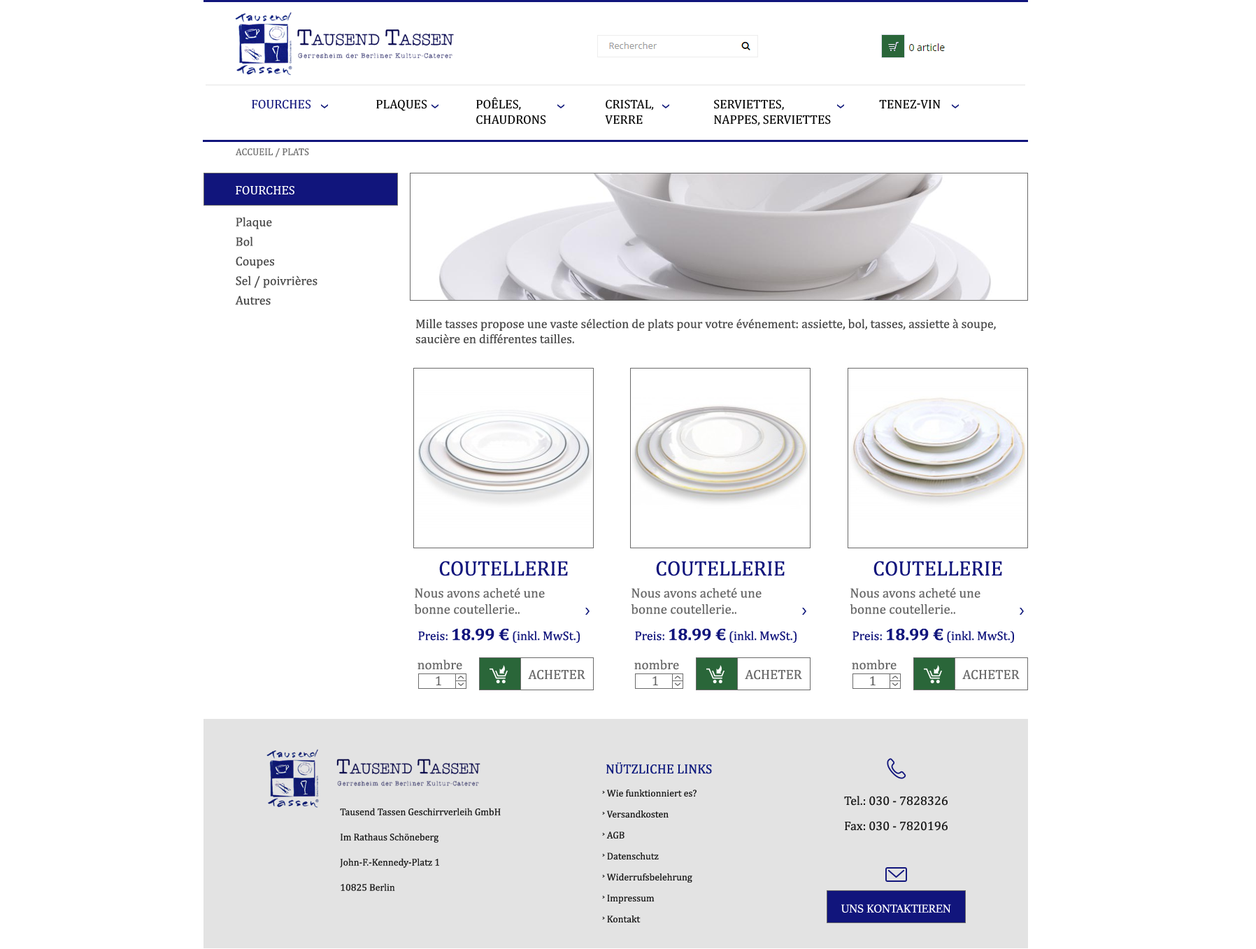
<style>
.page{position:relative;width:1256px;height:949px;background:#ffffff}
.page>*{position:absolute;margin:0}
.t1{font:12.6px "CambriaMath";color:#11157c;text-transform:uppercase}
.t2{font:12.6px "CambriaMath";color:#000000;text-transform:uppercase}
.t3{font:9.8px "Cambria";color:#757575;text-transform:uppercase}
.t4{font:12.6px "CambriaMath";color:#ffffff;text-transform:uppercase}
.t5{font:12.6px/9.8px "Cambria";color:#4b4b4b}
.t6{font:12.6px "Cambria";color:#4b4b4b}
.t7{font:21px "Cambria";color:#11157c;text-transform:uppercase}
.t8{font:13.5px "Cambria";color:#6a6a6a}
.t9{font:12.6px "Cambria";color:#11157c}
.t10{font:16.8px "Cambria-Bold";color:#11157c}
.t11{font:13.5px "Cambria";color:#6a6a6a;text-transform:uppercase}
.t12{font:13.3px "Cambria";color:#101c7e}
.t13{font:9.8px/21px "Cambria";color:#1c1c1c}
.t14{font:9.8px/21px "Cambria";color:#101c7e}
.t15{font:12.6px/25.2px "Cambria";color:#1c1c1c}
.t16{font:9.8px/25.2px "Cambria";color:#1c1c1c}
.t17{font:12.6px "SitkaDisplay";color:#ffffff}
</style>
<div class="page">
<p class="t1" style="left:252px;top:99px;width:59px;height:10px">fourches</p>
<p class="t2" style="left:376px;top:99px;width:51px;height:12px">plaques</p>
<p class="t2" style="left:476px;top:97px;width:70px;height:28px">poêles, <br>chaudrons</p>
<p class="t2" style="left:605px;top:99px;width:49px;height:26px">cristal, <br>verre</p>
<p class="t2" style="left:714px;top:99px;width:117px;height:27px">serviettes, <br>nappes, serviettes</p>
<p class="t2" style="left:879px;top:99px;width:62px;height:10px">Tenez-vin</p>
<p class="t3" style="left:236px;top:148px;width:73px;height:9px">ACCUEIL / plats</p>
<p class="t4" style="left:236px;top:186px;width:58px;height:8px">fourches</p>
<p class="t5" style="left:235px;top:217px;width:83px;height:88px">Plaque<br><br>Bol<br><br>Coupes<br><br>Sel / poivrières<br><br>Autres</p>
<p class="t6" style="left:415px;top:319px;width:581px;height:24px">Mille tasses propose une vaste sélection de plats pour votre événement: assiette, bol, tasses, assiette à soupe, saucière en différentes tailles.</p>
<p class="t7" style="left:439px;top:561px;width:129px;height:15px">coutellerie</p>
<p class="t7" style="left:656px;top:561px;width:129px;height:15px">coutellerie</p>
<p class="t7" style="left:874px;top:561px;width:128px;height:15px">coutellerie</p>
<p class="t8" style="left:414px;top:588px;width:131px;height:26px">Nous avons acheté une bonne coutellerie..</p>
<p class="t8" style="left:631px;top:588px;width:131px;height:26px">Nous avons acheté une bonne coutellerie..</p>
<p class="t8" style="left:850px;top:588px;width:131px;height:26px">Nous avons acheté une bonne coutellerie..</p>
<p class="t9" style="left:418px;top:629px;width:162px;height:15px">Preis: <span class="t10">18.99 €</span> (inkl. MwSt.)</p>
<p class="t9" style="left:635px;top:629px;width:162px;height:15px">Preis: <span class="t10">18.99 €</span> (inkl. MwSt.)</p>
<p class="t9" style="left:853px;top:629px;width:161px;height:15px">Preis: <span class="t10">18.99 €</span> (inkl. MwSt.)</p>
<p class="t8" style="left:418px;top:660px;width:44px;height:10px">nombre</p>
<p class="t8" style="left:634px;top:660px;width:45px;height:10px">nombre</p>
<p class="t8" style="left:852px;top:660px;width:45px;height:10px">nombre</p>
<p class="t8" style="left:436px;top:676px;width:5px;height:9px">1</p>
<p class="t11" style="left:528px;top:670px;width:57px;height:10px">acheter</p>
<p class="t8" style="left:653px;top:676px;width:5px;height:9px">1</p>
<p class="t11" style="left:745px;top:670px;width:57px;height:10px">acheter</p>
<p class="t8" style="left:870px;top:676px;width:6px;height:9px">1</p>
<p class="t11" style="left:962px;top:670px;width:58px;height:10px">acheter</p>
<p class="t12" style="left:606px;top:762px;width:106px;height:12px">NÜTZLICHE LINKS</p>
<p class="t13" style="left:602px;top:790px;width:95px;height:133px"><span class="t14"><br></span>˲ Wie funktionniert es?<br>˲ Versandkosten<br>˲ AGB<br>˲ Datenschutz<br>˲ Widerrufsbelehrung<br>˲ Impressum <br>˲ Kontakt</p>
<p class="t15" style="left:844px;top:796px;width:104px;height:35px">Tel.: 030 - 7828326<br>Fax: 030 - 7820196</p>
<p class="t16" style="left:340px;top:808px;width:161px;height:83px">Tausend Tassen Geschirrverleih GmbH<br>Im Rathaus Schöneberg<br>John-F.-Kennedy-Platz 1<br>10825 Berlin</p>
<p class="t17" style="left:841px;top:904px;width:110px;height:9px">UNS KONTAKTIEREN</p>
</div>
